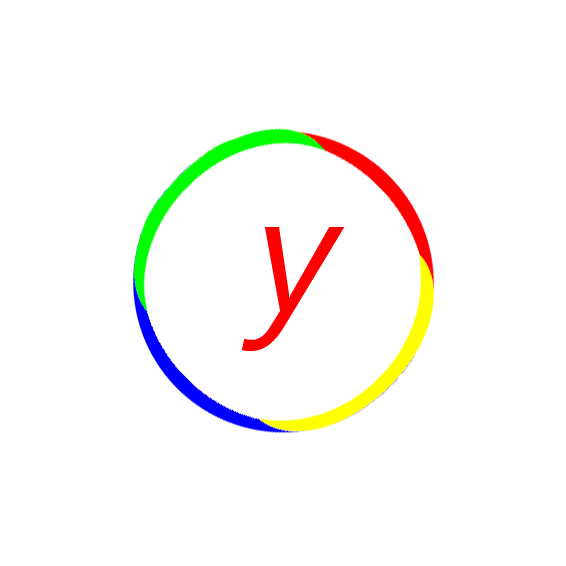
<style>
.page{position:relative;width:566px;height:566px;background:#ffffff}
.page>*{position:absolute;margin:0}
.t1{font:166.7px "SegoeUI-Italic";color:#ff0000}
</style>
<div class="page">
<p class="t1" style="left:241px;top:227px;width:104px;height:124px">y</p>
</div>
